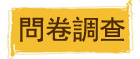
<style>
.page{position:relative;width:140px;height:59px;background:#f3be30}
.page>*{position:absolute;margin:0}
.t1{font:27px "SimHei";color:#4f2b07}
</style>
<div class="page">
<p class="t1" style="left:20px;top:16px;width:105px;height:26px">問卷調查</p>
</div>
